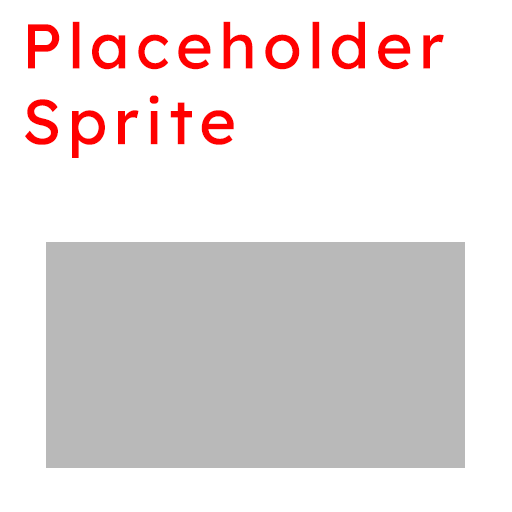
<style>
.page{position:relative;width:512px;height:512px;background:#ffffff}
.page>*{position:absolute;margin:0}
.t1{font:63px "Lexend-Regular";letter-spacing:0.1em;color:#ff0000}
</style>
<div class="page">
<p class="t1" style="left:25px;top:21px;width:419px;height:137px">Placeholder<br>Sprite</p>
</div>
